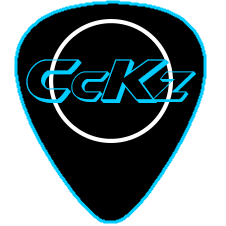
<style>
.page{position:relative;width:226px;height:226px;background:#000000}
.page>*{position:absolute;margin:0}
.t1{font:72.9px "AirstrikeBold3D";letter-spacing:-0.02em;color:#00ccff;font-variant:small-caps}
</style>
<div class="page">
<p class="t1" style="left:26px;top:59px;width:170px;height:44px">CcKz</p>
</div>
